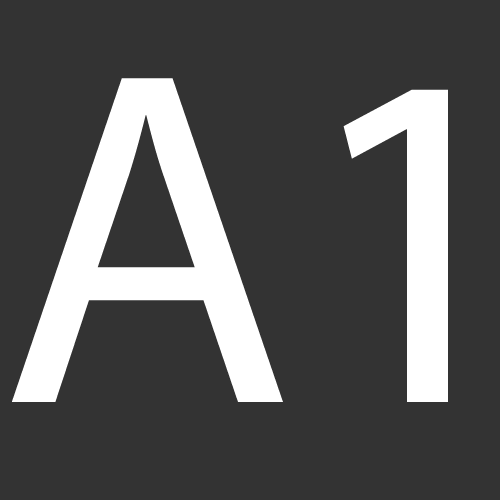
<style>
.page{position:relative;width:500px;height:500px;background:#333333}
.page>*{position:absolute;margin:0}
.t1{font:480.2px "MyriadPro-Regular";color:#ffffff}
</style>
<div class="page">
<p class="t1" style="left:12px;top:78px;width:436px;height:324px">A1</p>
</div>
